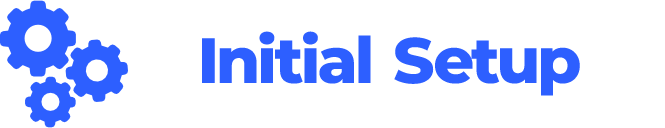
<style>
.page{position:relative;width:665px;height:128px;background:#ffffff}
.page>*{position:absolute;margin:0}
.t1{font:64px "MontserratRoman-ExtraBold";color:#2d5fff;font-weight:bold}
</style>
<div class="page">
<p class="t1" style="left:202px;top:31px;width:378px;height:65px">Initial Setup</p>
</div>
